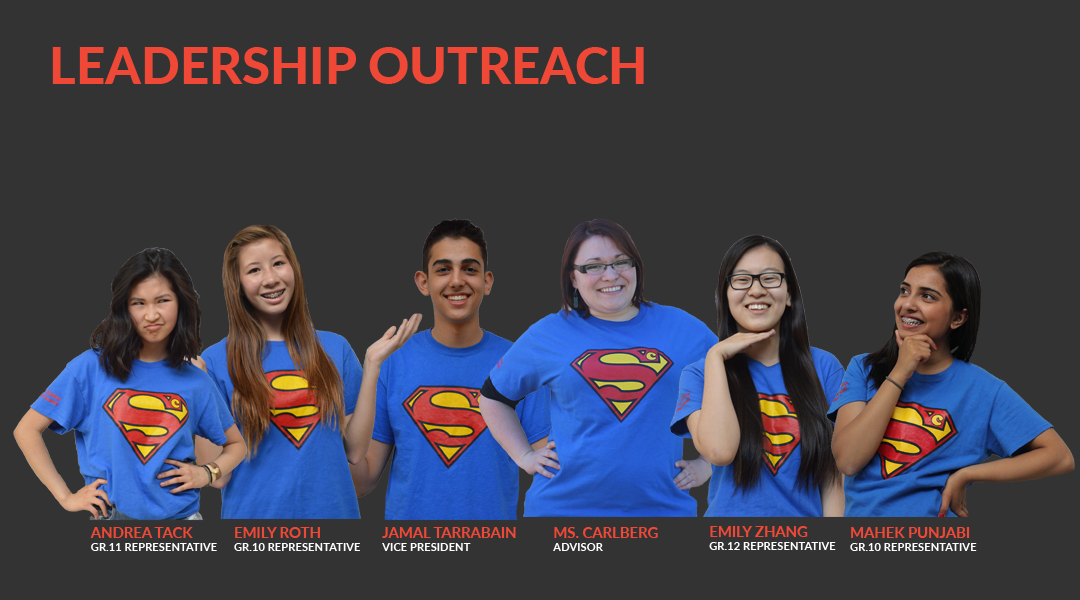
<style>
.page{position:relative;width:1080px;height:600px;background:#333333}
.page>*{position:absolute;margin:0}
.t1{font:51px "Lato-Heavy";color:#ef4836}
.t2{font:11.2px "Lato-Bold";color:#ffffff}
.t3{font:14.8px "Lato-Bold";color:#ef4836}
</style>
<div class="page">
<p class="t1" style="left:52px;top:47px;width:592px;height:37px">LEADERSHIP OUTREACH</p>
<p class="t2" style="left:90px;top:527px;width:127px;height:24px"><span class="t3">ANDREA TACK<br></span>GR.11 REPRESENTATIVE</p>
<p class="t2" style="left:234px;top:527px;width:126px;height:24px"><span class="t3">EMILY ROTH<br></span>GR.10 REPRESENTATIVE</p>
<p class="t3" style="left:382px;top:527px;width:134px;height:24px">JAMAL TARRABAIN<br><span class="t2">VICE PRESIDENT</span></p>
<p class="t3" style="left:553px;top:527px;width:105px;height:24px">MS. CARLBERG<br><span class="t2">ADVISOR</span></p>
<p class="t2" style="left:709px;top:526px;width:127px;height:24px"><span class="t3">EMILY ZHANG<br></span>GR.12 REPRESENTATIVE</p>
<p class="t2" style="left:850px;top:527px;width:127px;height:24px"><span class="t3">MAHEK PUNJABI<br></span>GR.10 REPRESENTATIVE</p>
</div>
